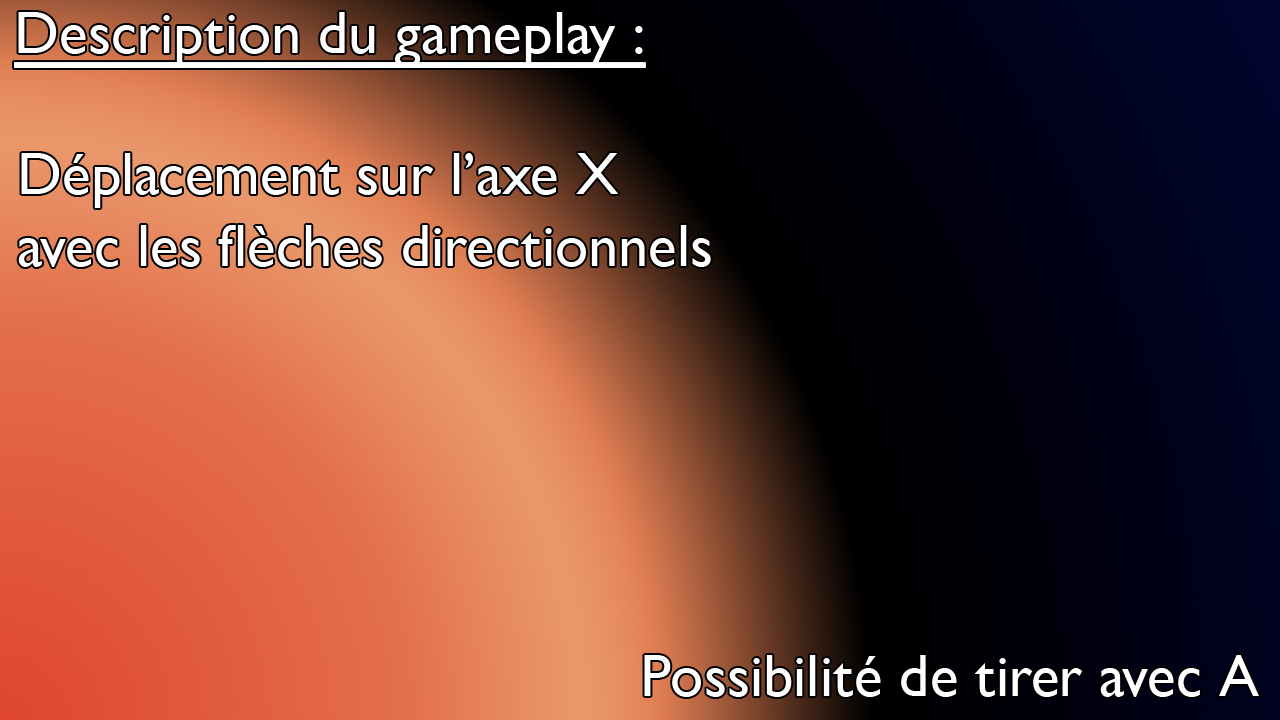
<style>
.page{position:relative;width:1280px;height:720px}
.page>*{position:absolute;margin:0}
.t1{font:60px "GillSansNova";color:#ffffff;text-decoration:underline}
.t2{font:60px "GillSansNova";color:#ffffff}
</style>
<div class="page">
<p class="t1" style="left:14px;top:12px;width:632px;height:56px">Description du gameplay :</p>
<p class="t2" style="left:18px;top:153px;width:693px;height:114px">Déplacement sur l’axe X<br>avec les flèches directionnels</p>
<p class="t2" style="left:644px;top:655px;width:615px;height:42px">Possibilité de tirer avec A</p>
</div>
